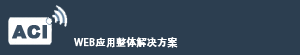
<style>
.page{position:relative;width:300px;height:55px;background:#2c3e50}
.page>*{position:absolute;margin:0}
.t1{font:18px "Arial-Black";color:#3a4f63;text-transform:uppercase;font-weight:bold}
.t2{font:10px "AdobeHeitiStd-Regular";color:#ffffff;text-transform:uppercase;font-weight:bold}
</style>
<div class="page">
<p class="t1" style="left:12px;top:25px;width:35px;height:14px">ACI</p>
<p class="t2" style="left:74px;top:37px;width:104px;height:11px">web应用整体解决方案</p>
</div>
